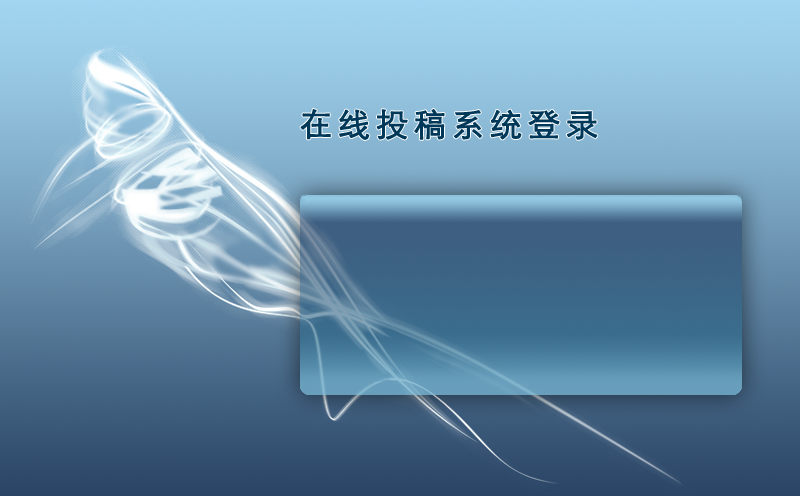
<style>
.page{position:relative;width:800px;height:496px}
.page>*{position:absolute;margin:0}
.t1{font:32px "STXihei";letter-spacing:0.16em;color:#003859;font-weight:bold}
</style>
<div class="page">
<p class="t1" style="left:300px;top:109px;width:298px;height:31px">在线投稿系统登录</p>
</div>
